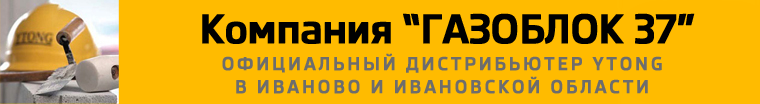
<style>
.page{position:relative;width:760px;height:104px;background:#ffbb00}
.page>*{position:absolute;margin:0}
.t1{font:40px "SkodaPro-Bold";letter-spacing:-0.025em;color:#000000;font-weight:bold}
.t2{font:18px "SkodaPro-Bold";letter-spacing:0.13em;color:#6d6d6d;font-weight:bold}
</style>
<div class="page">
<p class="t1" style="left:202px;top:13px;width:493px;height:31px">Компания “ГАЗОБЛОК 37”</p>
<p class="t2" style="left:222px;top:53px;width:440px;height:41px;text-align:center">ОФИЦИАЛЬНЫЙ ДИСТРИБЬЮТЕР YTONG<br>В ИВАНОВО И ИВАНОВСКОЙ ОБЛАСТИ</p>
</div>
